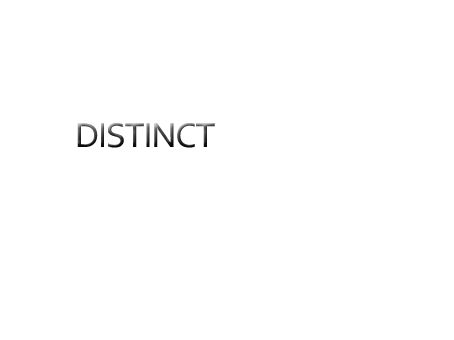
<style>
.page{position:relative;width:454px;height:340px;background:#ffffff}
.page>*{position:absolute;margin:0}
.t1{font:36px "Corbel";letter-spacing:-0.03em}
</style>
<div class="page">
<p class="t1" style="left:77px;top:123px;width:138px;height:25px">DISTINCT</p>
</div>
